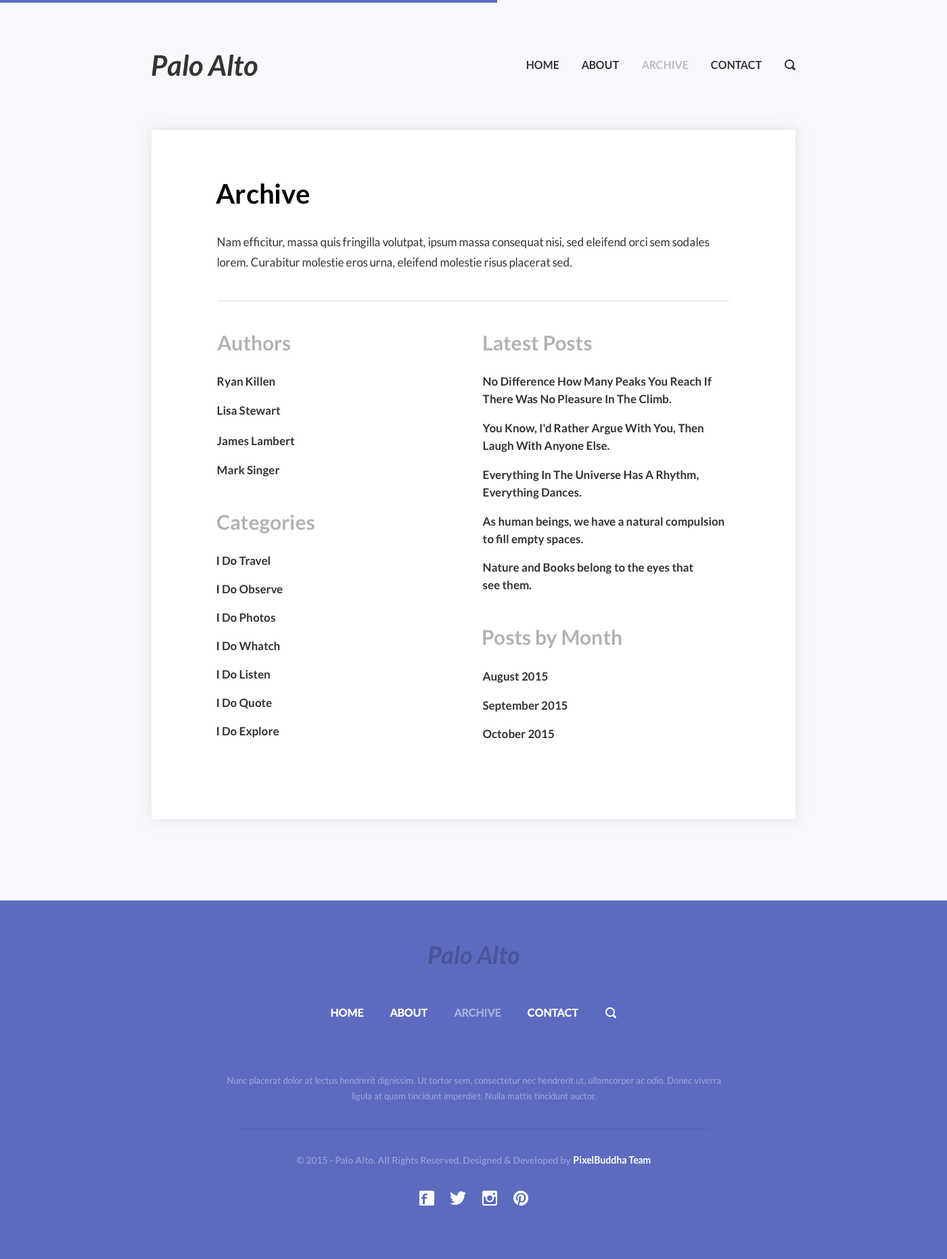
<style>
.page{position:relative;width:947px;height:1259px;background:#ffffff}
.page>*{position:absolute;margin:0}
.t1{font:28.4px "Lato-BoldItalic";color:#333333}
.t2{font:10.8px "Lato-Bold";color:#333333;text-transform:uppercase}
.t3{font:10.8px "Lato-Bold";color:#bdbdbd;text-transform:uppercase}
.t4{font:27.1px "Lato-Bold";color:#000000}
.t5{font:11.5px/20.3px "Lato-Regular";color:#333333}
.t6{font:20.3px "Lato-Bold";color:#b2b2b2}
.t7{font:11.5px "Lato-Bold";color:#333333}
.t8{font:11.5px/17.6px "Lato-Bold";color:#333333}
.t9{font:24.4px "Lato-BoldItalic";color:#4a569a}
.t10{font:10.8px "Lato-Bold";color:#ffffff;text-transform:uppercase}
.t11{font:10.8px "Lato-Bold";color:#a9afdb;text-transform:uppercase}
.t12{font:8.8px/15.6px "Lato-Regular";color:#9da6d9}
.t13{font:9.5px "Lato-Regular";color:#9da6d9}
.t14{font:9.5px "Lato-Bold";color:#ffffff}
</style>
<div class="page">
<p class="t1" style="left:152px;top:54px;width:106px;height:22px">Palo Alto</p>
<p class="t2" style="left:526px;top:60px;width:236px;height:10px">home           about           <span class="t3">archive</span>           contact</p>
<p class="t4" style="left:216px;top:183px;width:93px;height:21px">Archive</p>
<p class="t5" style="left:217px;top:237px;width:493px;height:32px">Nam efficitur, massa quis fringilla volutpat, ipsum massa consequat nisi, sed eleifend orci sem sodales lorem. Curabitur molestie eros urna, eleifend molestie risus placerat sed.</p>
<p class="t6" style="left:217px;top:335px;width:74px;height:16px">Authors</p>
<p class="t6" style="left:484px;top:336px;width:108px;height:15px">Latest Posts</p>
<p class="t7" style="left:217px;top:377px;width:58px;height:11px">Ryan Killen</p>
<p class="t8" style="left:482px;top:377px;width:230px;height:27px">No Difference How Many Peaks You Reach If There Was No Pleasure In The Climb.</p>
<p class="t7" style="left:217px;top:406px;width:64px;height:9px">Lisa Stewart</p>
<p class="t8" style="left:482px;top:424px;width:222px;height:28px">You Know, I'd Rather Argue With You, Then Laugh With Anyone Else.</p>
<p class="t7" style="left:216px;top:436px;width:79px;height:10px">James Lambert</p>
<p class="t7" style="left:217px;top:465px;width:63px;height:12px">Mark Singer</p>
<p class="t8" style="left:483px;top:470px;width:216px;height:29px">Everything In The Universe Has A Rhythm, Everything Dances.</p>
<p class="t6" style="left:217px;top:514px;width:98px;height:20px">Categories</p>
<p class="t8" style="left:482px;top:517px;width:243px;height:28px">As human beings, we have a natural compulsion to fill empty spaces.</p>
<p class="t7" style="left:217px;top:556px;width:53px;height:10px">I Do Travel</p>
<p class="t8" style="left:483px;top:563px;width:210px;height:27px">Nature and Books belong to the eyes that see them.</p>
<p class="t7" style="left:217px;top:585px;width:66px;height:9px">I Do Observe</p>
<p class="t7" style="left:217px;top:613px;width:58px;height:9px">I Do Photos</p>
<p class="t6" style="left:483px;top:629px;width:139px;height:19px">Posts by Month</p>
<p class="t7" style="left:217px;top:641px;width:63px;height:10px">I Do Whatch</p>
<p class="t7" style="left:217px;top:670px;width:53px;height:9px">I Do Listen</p>
<p class="t7" style="left:482px;top:672px;width:66px;height:11px">August 2015</p>
<p class="t7" style="left:217px;top:698px;width:55px;height:11px">I Do Quote</p>
<p class="t7" style="left:482px;top:701px;width:86px;height:11px">September 2015</p>
<p class="t7" style="left:217px;top:727px;width:62px;height:10px">I Do Explore</p>
<p class="t7" style="left:483px;top:729px;width:71px;height:10px">October 2015</p>
<p class="t9" style="left:428px;top:946px;width:92px;height:19px">Palo Alto</p>
<p class="t10" style="left:331px;top:1008px;width:247px;height:9px">Home             about             <span class="t11">archive</span>             contact</p>
<p class="t12" style="left:227px;top:1076px;width:494px;height:25px;text-align:center">Nunc placerat dolor at lectus hendrerit dignissim. Ut tortor sem, consectetur nec hendrerit ut, ullamcorper ac odio. Donec viverra ligula at quam tincidunt imperdiet. Nulla mattis tincidunt auctor.</p>
<p class="t13" style="left:296px;top:1156px;width:275px;height:10px">© 2015 - Palo Alto. All Rights Reserved. Designed &amp; Developed by</p>
<p class="t14" style="left:574px;top:1155px;width:77px;height:9px">PixelBuddha Team</p>
</div>
